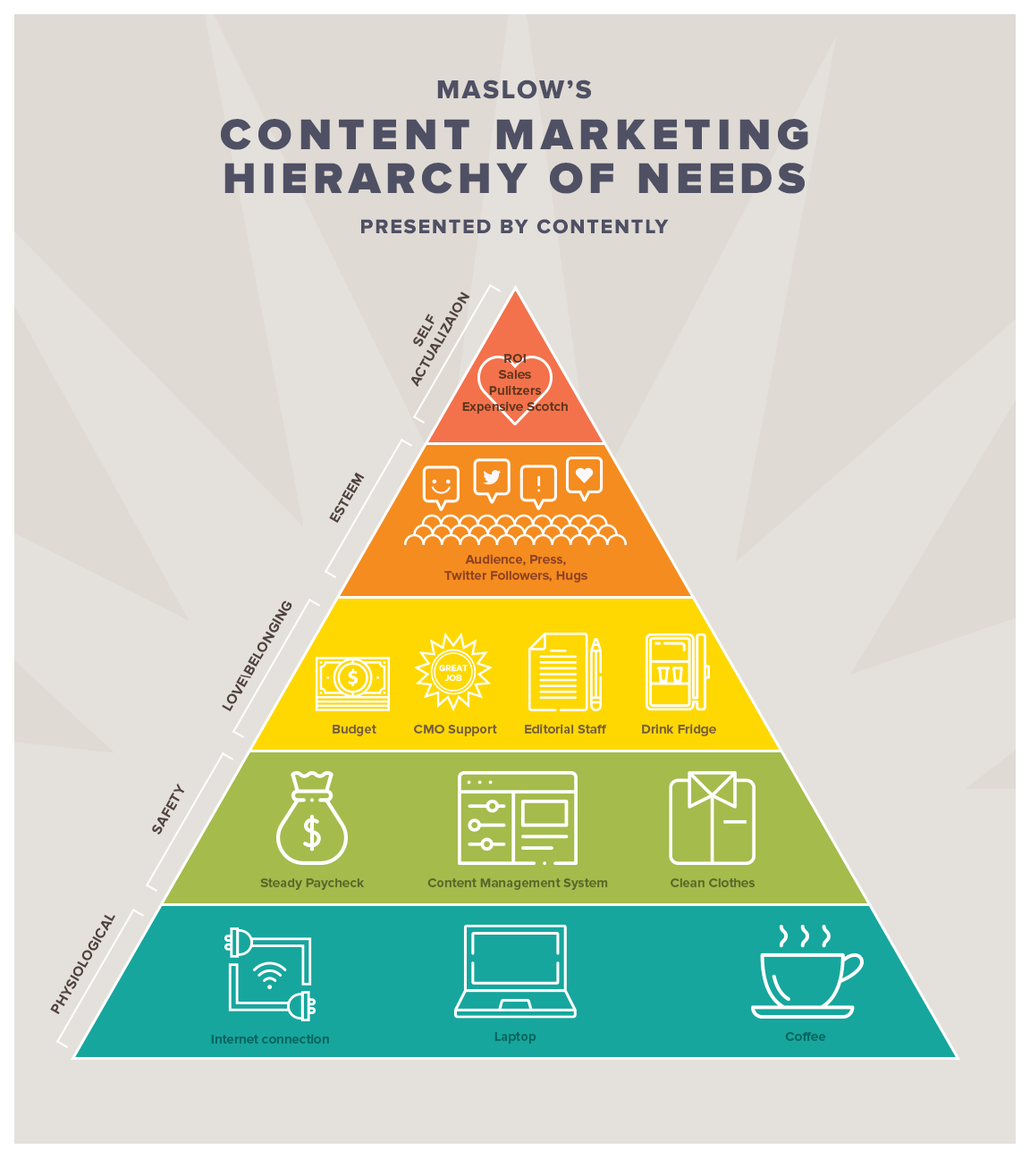
<style>
.page{position:relative;width:1030px;height:1158px;background:#e4e1dc}
.page>*{position:absolute;margin:0}
.t1{font:26.8px "ProximaNova-Extrabld";letter-spacing:0.08em;color:#4f5064;text-transform:uppercase}
.t2{font:44.7px "ProximaNova-Black";letter-spacing:0.14em;color:#4f5064;text-transform:uppercase}
.t3{font:44.7px "ProximaNova-Black";letter-spacing:0.12em;color:#4f5064;text-transform:uppercase}
.t4{font:20.6px "ProximaNova-Extrabld";letter-spacing:0.08em;color:#4f5064;text-transform:uppercase}
.t5{font:14.3px "ProximaNova-Bold";letter-spacing:0.02em;color:#51423d;text-transform:uppercase}
.t6{font:13.4px/16.1px "ProximaNova-Bold";color:#603620}
.t7{font:13.4px/16.1px "ProximaNova-Bold";color:#8e4222}
.t8{font:13.4px "ProximaNova-Bold";color:#765e38}
.t9{font:13.4px "ProximaNova-Bold";color:#5a692a}
.t10{font:13.4px "ProximaNova-Bold";color:#06645e}
</style>
<div class="page">
<p class="t1" style="left:437px;top:80px;width:154px;height:19px">Maslow’s</p>
<p class="t2" style="left:221px;top:119px;width:587px;height:31px">content marketing</p>
<p class="t3" style="left:224px;top:163px;width:580px;height:31px">Hierarchy of needs</p>
<p class="t4" style="left:361px;top:219px;width:307px;height:15px">Presented by contently</p>
<p class="t5" style="left:410px;top:291px;width:60px;height:96px;text-align:center;rotate:-60deg">Self<br>Actualizaion</p>
<p class="t6" style="left:462px;top:354px;width:105px;height:60px;text-align:center">ROI<br>Sales<br>Pulitzers<br>Expensive Scotch</p>
<p class="t5" style="left:329px;top:472px;width:36px;height:52px;rotate:-60deg">Esteem</p>
<p class="t7" style="left:444px;top:554px;width:143px;height:29px;text-align:center">Audience, Press,<br>Twitter Followers, Hugs</p>
<p class="t5" style="left:222px;top:601px;width:70px;height:111px;rotate:-60deg">Love\Belonging</p>
<p class="t8" style="left:332px;top:725px;width:44px;height:11px">Budget</p>
<p class="t8" style="left:414px;top:725px;width:83px;height:11px">CMO Support</p>
<p class="t8" style="left:525px;top:724px;width:82px;height:10px">Editorial Staff</p>
<p class="t8" style="left:642px;top:724px;width:74px;height:12px">Drink Fridge</p>
<p class="t5" style="left:152px;top:783px;width:33px;height:52px;rotate:-60deg">Safety</p>
<p class="t9" style="left:260px;top:878px;width:104px;height:12px">Steady Paycheck</p>
<p class="t9" style="left:427px;top:878px;width:181px;height:12px">Content Management System</p>
<p class="t9" style="left:670px;top:878px;width:85px;height:9px">Clean Clothes</p>
<p class="t5" style="left:50px;top:914px;width:65px;height:101px;rotate:-60deg">Physiological</p>
<p class="t10" style="left:211px;top:1034px;width:118px;height:10px">Internet connection</p>
<p class="t10" style="left:494px;top:1032px;width:42px;height:12px">Laptop</p>
<p class="t10" style="left:785px;top:1032px;width:41px;height:9px">Coffee</p>
</div>
